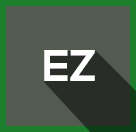
<style>
.page{position:relative;width:136px;height:132px;background:#535a50}
.page>*{position:absolute;margin:0}
.t1{font:44px "NexaBold";color:#ffffff}
</style>
<div class="page">
<p class="t1" style="left:44px;top:50px;width:51px;height:31px">EZ</p>
</div>
